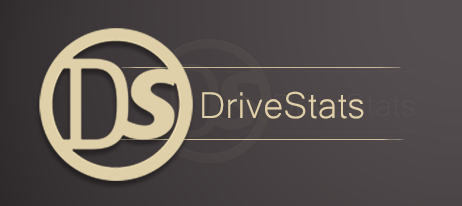
<style>
.page{position:relative;width:462px;height:206px}
.page>*{position:absolute;margin:0}
.t1{font:48px "Microsoft-Yi-Baiti";color:#e0d0a9}
</style>
<div class="page">
<p class="t1" style="left:202px;top:91px;width:162px;height:28px">DriveStats</p>
</div>
